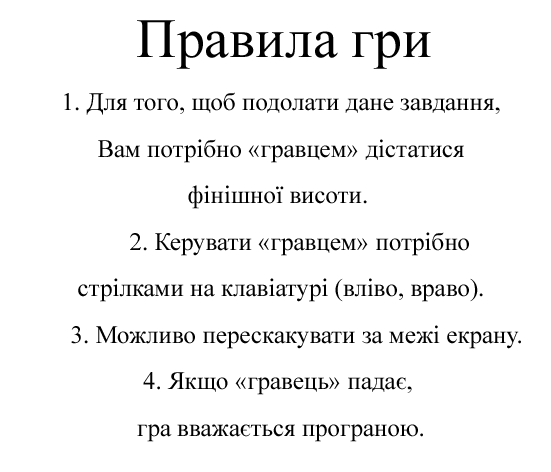
<style>
.page{position:relative;width:551px;height:472px;background:#ffffff}
.page>*{position:absolute;margin:0}
.t1{font:55.6px "TimesNewRomanPSMT";color:#000000}
.t2{font:25px/46.5px "TimesNewRomanPSMT";color:#000000}
</style>
<div class="page">
<p class="t1" style="left:137px;top:20px;width:294px;height:49px">Правила гри</p>
<p class="t2" style="left:64px;top:92px;width:457px;height:350px;text-align:center">1. Для того, щоб подолати дане завдання,<br>Вам потрібно «гравцем» дістатися<br>фінішної висоти. <br>       2. Керувати «гравцем» потрібно <br>стрілками на клавіатурі (вліво, враво).<br>     3. Можливо перескакувати за межі екрану.<br>4. Якщо «гравець» падає, <br>гра вважається програною.</p>
</div>
